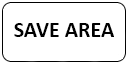
<style>
.page{position:relative;width:128px;height:64px;background:#ffffff}
.page>*{position:absolute;margin:0}
.t1{font:22px "Calibri-Bold";color:#000000}
</style>
<div class="page">
<p class="t1" style="left:14px;top:23px;width:100px;height:14px">SAVE AREA</p>
</div>
